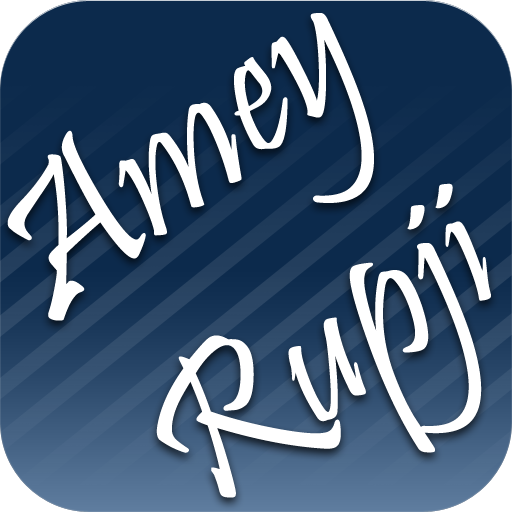
<style>
.page{position:relative;width:512px;height:512px;background:#0c2a4c}
.page>*{position:absolute;margin:0}
.t1{font:206.5px "Pristina-Regular";color:#ffffff}
</style>
<div class="page">
<p class="t1" style="left:7px;top:13px;width:484px;height:485px;rotate:-38deg">Amey<br>Rupji</p>
</div>
